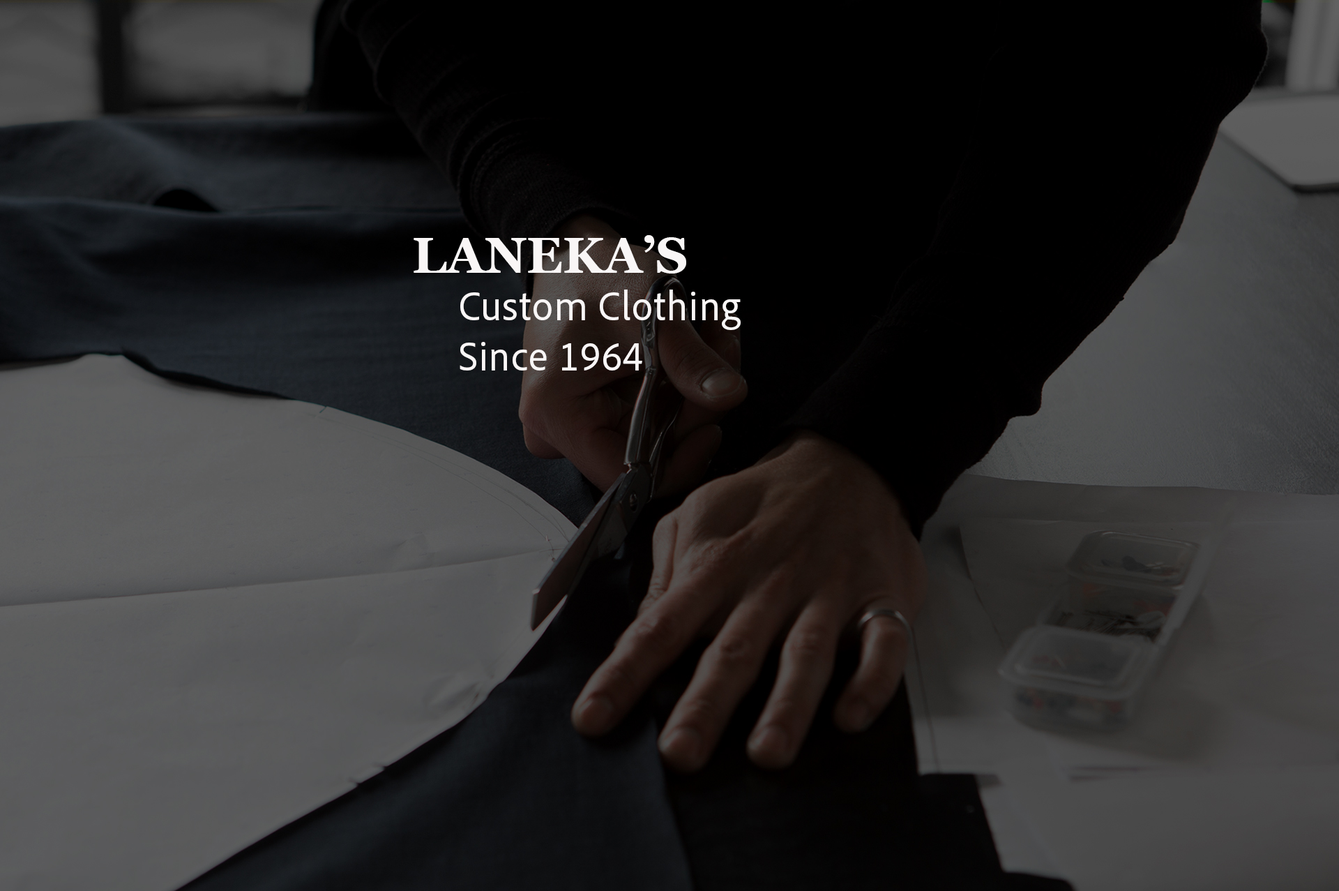
<style>
.page{position:relative;width:1339px;height:891px}
.page>*{position:absolute;margin:0}
.t1{font:50.2px "Georgia-Bold";color:#f9f6f6}
.t2{font:41.8px "AdobeCleanUX-Regular";color:#f9f6f6}
</style>
<div class="page">
<p class="t1" style="left:414px;top:235px;width:272px;height:38px">LANEKA’S</p>
<p class="t2" style="left:460px;top:289px;width:281px;height:81px">Custom Clothing<br>Since 1964</p>
</div>
